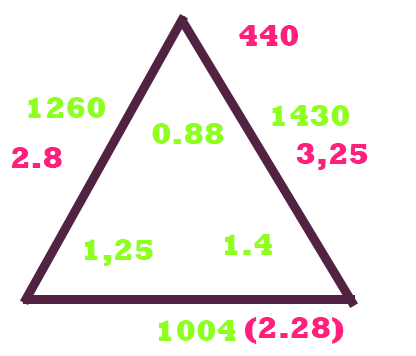
<style>
.page{position:relative;width:416px;height:356px;background:#ffffff}
.page>*{position:absolute;margin:0}
.t1{font:30px "Rockwell-ExtraBold";color:#ff207e}
.t2{font:30px "Rockwell-ExtraBold";color:#8fff20}
</style>
<div class="page">
<p class="t1" style="left:238px;top:25px;width:61px;height:21px">440</p>
<p class="t2" style="left:28px;top:97px;width:78px;height:21px">1260</p>
<p class="t2" style="left:272px;top:105px;width:78px;height:21px">1430</p>
<p class="t2" style="left:152px;top:123px;width:72px;height:21px">0.88</p>
<p class="t1" style="left:11px;top:147px;width:51px;height:21px">2.8</p>
<p class="t1" style="left:296px;top:143px;width:72px;height:27px">3,25</p>
<p class="t2" style="left:85px;top:239px;width:68px;height:27px">1,25</p>
<p class="t2" style="left:225px;top:234px;width:47px;height:21px">1.4</p>
<p class="t1" style="left:245px;top:317px;width:99px;height:27px">(2.28)</p>
<p class="t2" style="left:159px;top:320px;width:77px;height:21px">1004</p>
</div>
